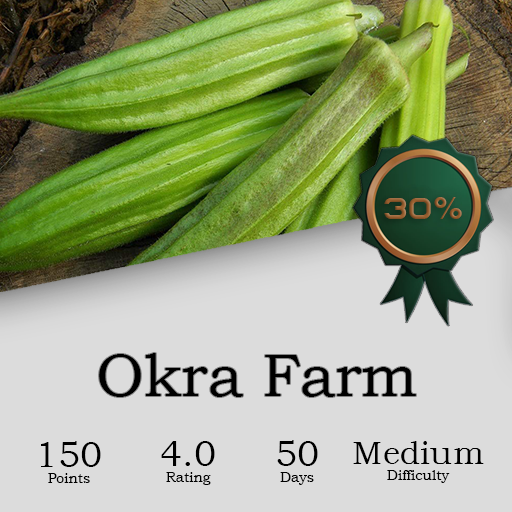
<style>
.page{position:relative;width:512px;height:512px;background:#dcdcdc}
.page>*{position:absolute;margin:0}
.t1{font:60px "BookmanOldStyle";color:#000000}
.t2{font:14px "BookmanOldStyle";color:#000000}
.t3{font:36px "BookmanOldStyle";color:#000000}
.t4{font:33px "BookmanOldStyle";color:#000000}
</style>
<div class="page">
<p class="t1" style="left:99px;top:353px;width:317px;height:44px">Okra Farm</p>
<p class="t2" style="left:41px;top:441px;width:60px;height:42px;text-align:center"><span class="t3">150<br></span>Points</p>
<p class="t2" style="left:161px;top:441px;width:54px;height:44px;text-align:center"><span class="t3">4.0<br></span>Rating</p>
<p class="t2" style="left:277px;top:440px;width:41px;height:45px;text-align:center"><span class="t3">50<br></span>Days</p>
<p class="t2" style="left:353px;top:441px;width:131px;height:42px;text-align:center"><span class="t4">Medium<br></span>Difficulty</p>
</div>
